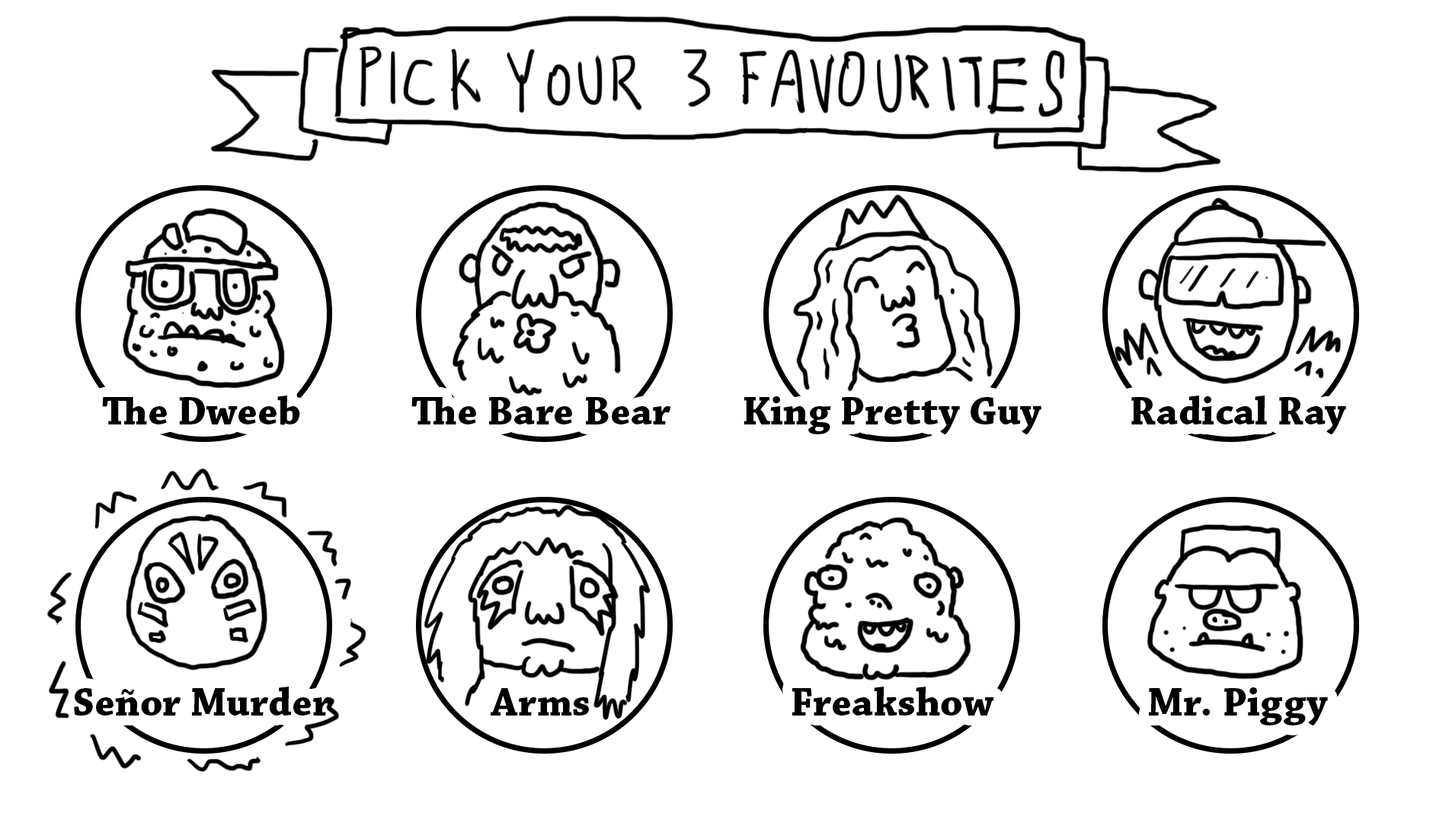
<style>
.page{position:relative;width:1449px;height:823px;background:#ffffff}
.page>*{position:absolute;margin:0}
.t1{font:41.1px "ChaparralPro-Bold";color:#000000}
</style>
<div class="page">
<p class="t1" style="left:102px;top:395px;width:198px;height:30px">The Dweeb</p>
<p class="t1" style="left:411px;top:397px;width:259px;height:27px">The Bare Bear</p>
<p class="t1" style="left:744px;top:396px;width:298px;height:38px">King Pretty Guy</p>
<p class="t1" style="left:1131px;top:395px;width:215px;height:39px">Radical Ray</p>
<p class="t1" style="left:74px;top:686px;width:257px;height:29px">Señor Murder</p>
<p class="t1" style="left:491px;top:688px;width:98px;height:27px">Arms</p>
<p class="t1" style="left:792px;top:686px;width:202px;height:29px">Freakshow</p>
<p class="t1" style="left:1149px;top:687px;width:179px;height:38px">Mr. Piggy</p>
</div>
